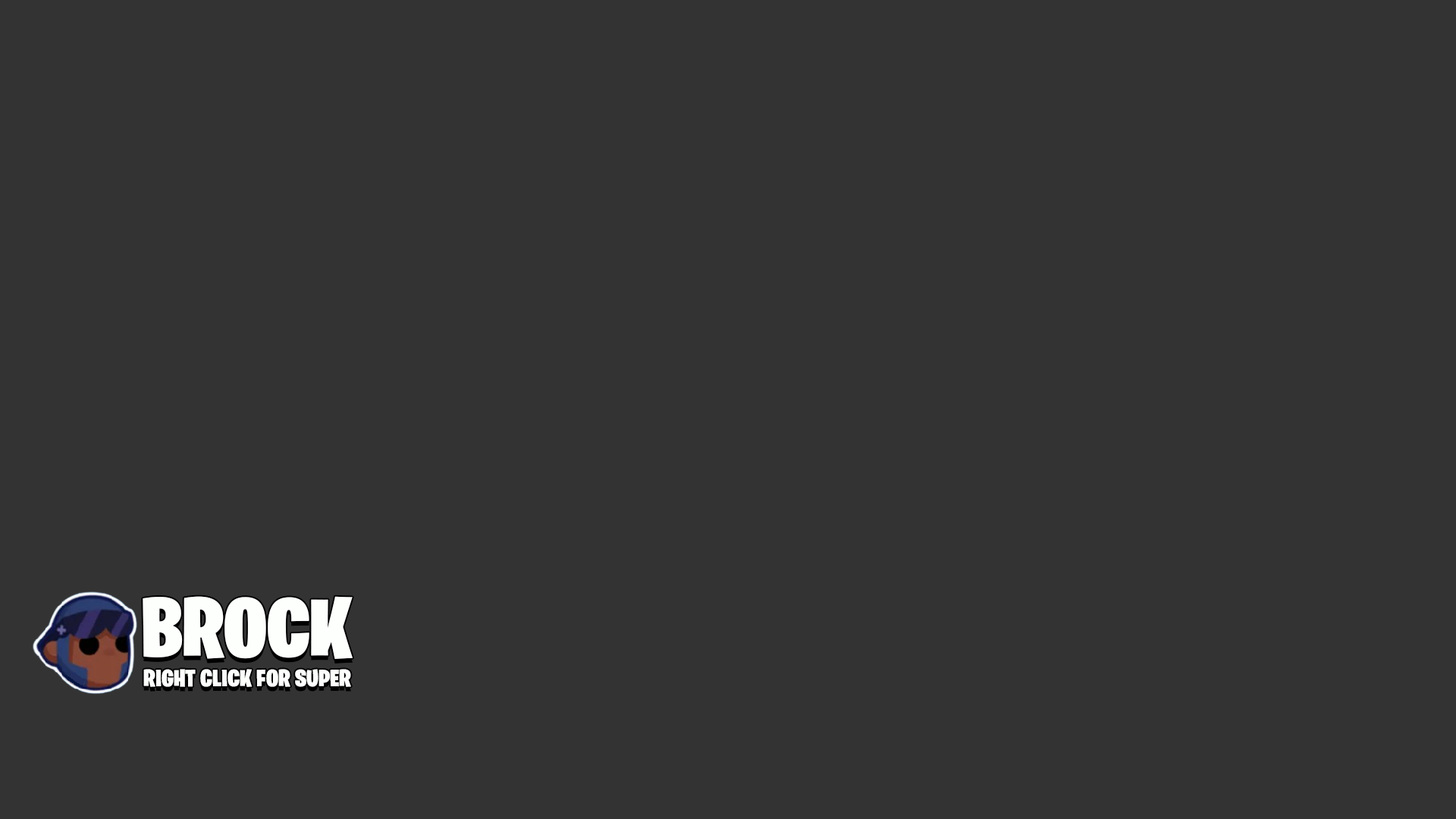
<style>
.page{position:relative;width:1456px;height:819px;background:#333333}
.page>*{position:absolute;margin:0}
.t1{font:84px "BurbankBigCondensed-Black";color:#fdfffd;scale:1.08 1}
.t2{font:23.9px "BurbankBigCondensed-Black";color:#fdfffd;scale:1.08 1}
</style>
<div class="page">
<p class="t1" style="left:143px;top:596px;width:210px;height:63px">BROCK</p>
<p class="t2" style="left:143px;top:669px;width:208px;height:18px">RIGHT CLICK FOR SUPER</p>
</div>
